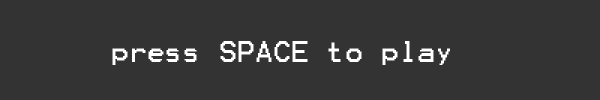
<style>
.page{position:relative;width:600px;height:100px;background:#333333}
.page>*{position:absolute;margin:0}
.t1{font:24px "Terminal";color:#ffffff}
</style>
<div class="page">
<p class="t1" style="left:112px;top:41px;width:338px;height:24px">press SPACE to play</p>
</div>
